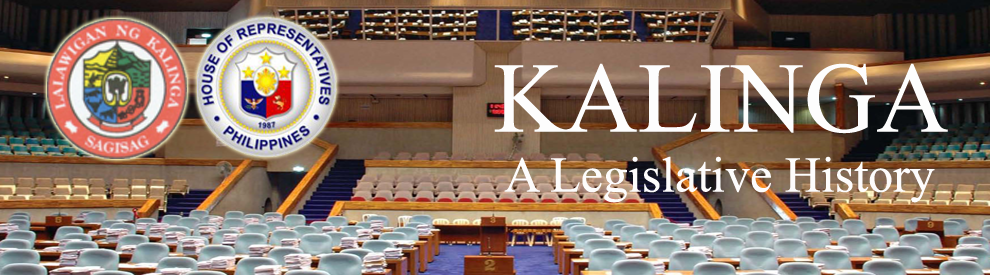
<style>
.page{position:relative;width:990px;height:275px}
.page>*{position:absolute;margin:0}
.t1{font:50px "TimesNewRomanPSMT";color:#fdfcfc}
.t2{font:100px "TimesNewRomanPSMT";color:#fdfdfd}
</style>
<div class="page">
<p class="t1" style="left:494px;top:63px;width:454px;height:140px;text-align:center"><span class="t2">KALINGA<br></span>A Legislative History</p>
</div>
